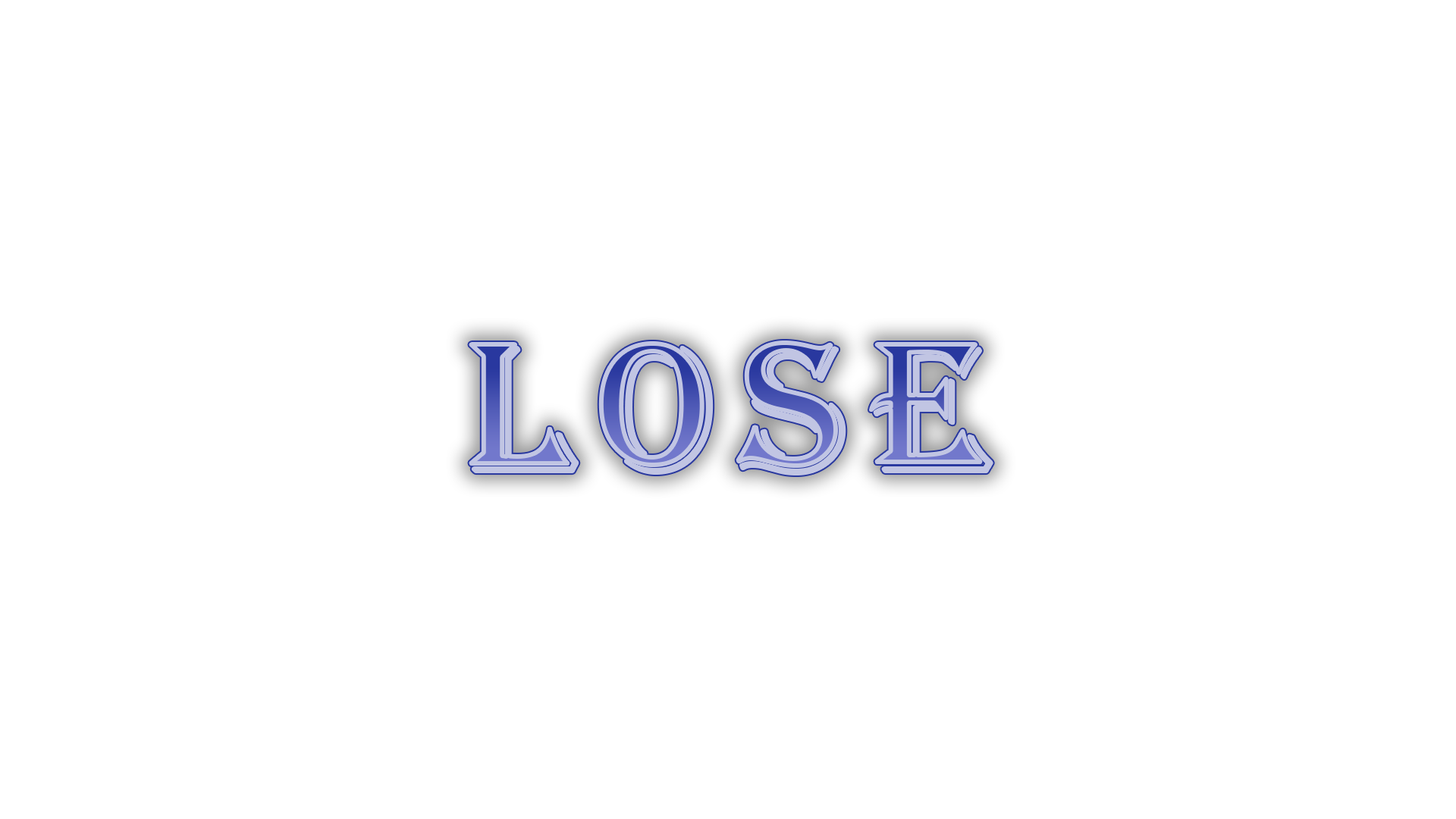
<style>
.page{position:relative;width:1456px;height:819px;background:#ffffff}
.page>*{position:absolute;margin:0}
.t1{font:189.6px "Algerian";letter-spacing:0.2em}
</style>
<div class="page">
<p class="t1" style="left:471px;top:343px;width:520px;height:130px">LOSE</p>
</div>
